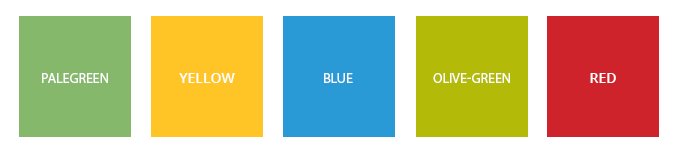
<style>
.page{position:relative;width:678px;height:158px;background:#ffffff}
.page>*{position:absolute;margin:0}
.t1{font:14px "MyriadPro-Regular";color:#ffffff;text-transform:uppercase}
.t2{font:14px "OpenSans-Semibold";color:#ffffff;text-transform:uppercase}
</style>
<div class="page">
<p class="t1" style="left:42px;top:73px;width:66px;height:10px">PaleGreen</p>
<p class="t2" style="left:179px;top:73px;width:56px;height:10px">Yellow</p>
<p class="t1" style="left:324px;top:73px;width:29px;height:10px">Blue</p>
<p class="t1" style="left:433px;top:73px;width:77px;height:10px">olive-green</p>
<p class="t2" style="left:590px;top:73px;width:26px;height:10px">Red</p>
</div>
